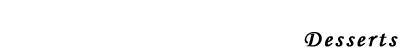
<style>
.page{position:relative;width:400px;height:55px;background:#ffffff}
.page>*{position:absolute;margin:0}
.t1{font:24px "MonotypeCorsiva";letter-spacing:0.1em;color:#000000;font-weight:bold}
</style>
<div class="page">
<p class="t1" style="left:304px;top:32px;width:94px;height:15px">Desserts</p>
</div>
